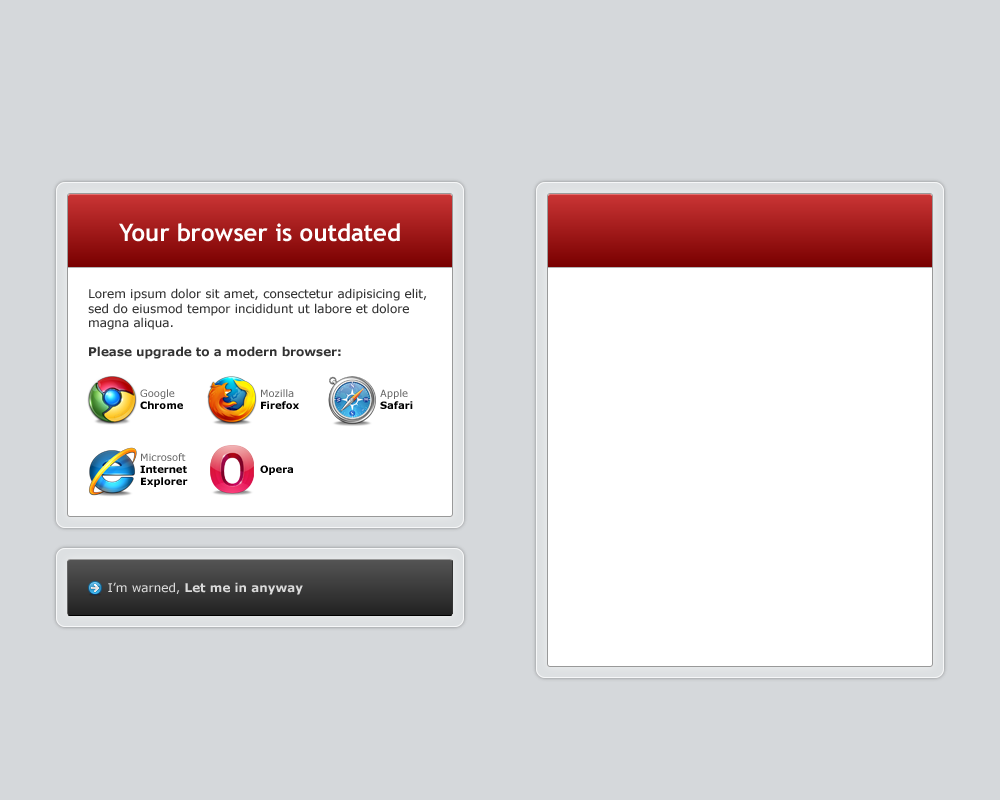
<style>
.page{position:relative;width:1000px;height:800px;background:#d5d8db}
.page>*{position:absolute;margin:0}
.t1{font:24px "TrebuchetMS-Bold";color:#fffefe}
.t2{font:12px "Verdana";color:#333333}
.t3{font:12px "Verdana-Bold";color:#333333}
.t4{font:10px "Verdana";color:#666666}
.t5{font:10px "Verdana-Bold";color:#000000}
.t6{font:12px "Verdana-Bold";color:#dadada}
.t7{font:12px "Verdana";color:#dadada}
</style>
<div class="page">
<p class="t1" style="left:119px;top:223px;width:281px;height:19px">Your browser is outdated</p>
<p class="t2" style="left:88px;top:288px;width:339px;height:71px">Lorem ipsum dolor sit amet, consectetur adipisicing elit, sed do eiusmod tempor incididunt ut labore et dolore magna aliqua. <br><br><span class="t3">Please upgrade to a modern browser:</span></p>
<p class="t4" style="left:140px;top:389px;width:43px;height:20px">Google<br><span class="t5">Chrome</span></p>
<p class="t4" style="left:261px;top:389px;width:38px;height:20px">Mozilla<br><span class="t5">Firefox</span></p>
<p class="t5" style="left:380px;top:389px;width:33px;height:20px"><span class="t4">Apple<br></span>Safari</p>
<p class="t5" style="left:140px;top:453px;width:48px;height:34px"><span class="t4">Microsoft<br></span>Internet<br>Explorer</p>
<p class="t5" style="left:260px;top:465px;width:33px;height:10px">Opera</p>
<p class="t6" style="left:108px;top:582px;width:195px;height:13px"><span class="t7">I’m warned, </span>Let me in anyway</p>
</div>
